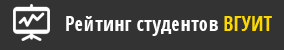
<style>
.page{position:relative;width:284px;height:50px;background:#333333}
.page>*{position:absolute;margin:0}
.t1{font:20px "OpenSans-CondensedBold";color:#fefefe}
.t2{font:20px "OpenSans-CondensedBold";color:#fcd800}
</style>
<div class="page">
<p class="t1" style="left:66px;top:16px;width:206px;height:20px">Рейтинг студентов <span class="t2">ВГУИТ</span></p>
</div>
